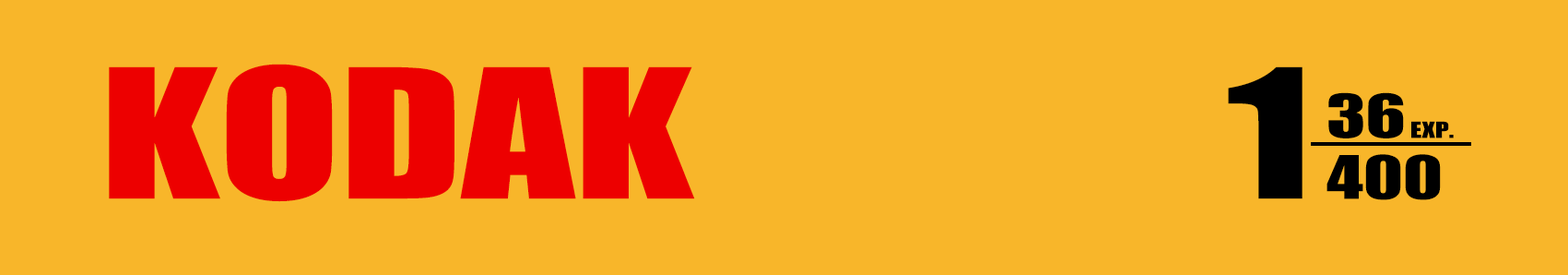
<style>
.page{position:relative;width:1568px;height:275px;background:#f8b62a}
.page>*{position:absolute;margin:0}
.t1{font:165.9px "Impact";color:#ed0000;scale:1.33 1}
.t2{font:11.1px "Impact";color:#000000;scale:1.33 1}
.t3{font:55.3px "Impact";color:#000000;scale:1.33 1}
.t4{font:20.7px "Impact";color:#000000;scale:1.33 1}
</style>
<div class="page">
<p class="t1" style="left:109px;top:64px;width:586px;height:138px">KODAK</p>
<p class="t2" style="left:1228px;top:66px;width:75px;height:133px">1</p>
<p class="t3" style="left:1328px;top:92px;width:76px;height:46px">36</p>
<p class="t4" style="left:1411px;top:121px;width:43px;height:17px">EXP.</p>
<p class="t3" style="left:1326px;top:154px;width:115px;height:46px">400</p>
</div>
